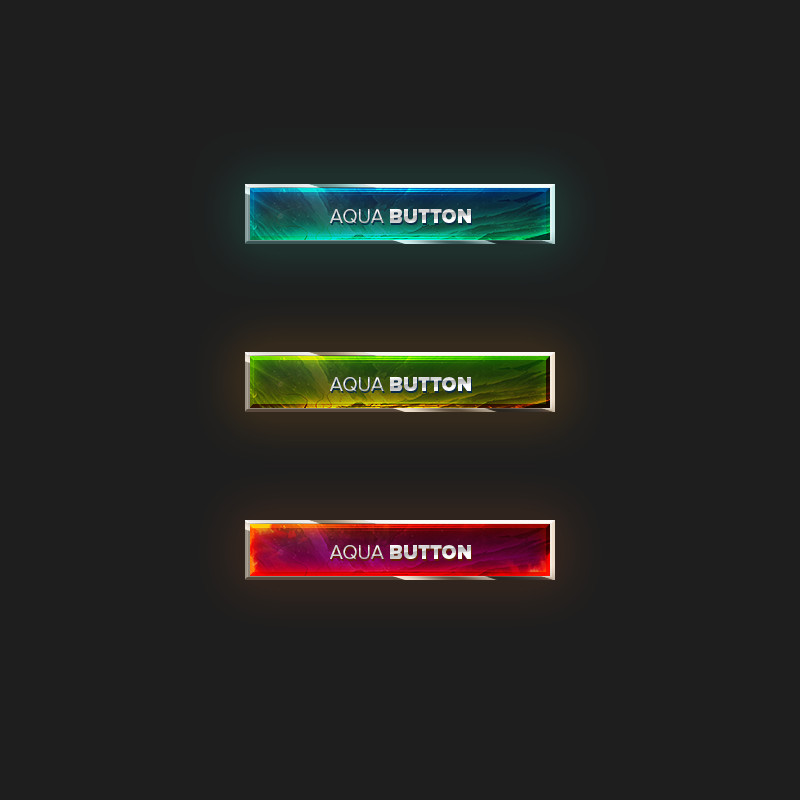
<style>
.page{position:relative;width:800px;height:800px;background:#1e1e1e}
.page>*{position:absolute;margin:0}
.t1{font:20px "ProximaNova-Black";text-transform:uppercase}
.t2{font:20px "ProximaNova-Light";text-transform:uppercase}
</style>
<div class="page">
<p class="t1" style="left:330px;top:209px;width:141px;height:15px"><span class="t2">Aqua </span>button</p>
<p class="t1" style="left:330px;top:377px;width:141px;height:15px"><span class="t2">Aqua </span>button</p>
<p class="t1" style="left:330px;top:545px;width:141px;height:15px"><span class="t2">Aqua </span>button</p>
</div>
